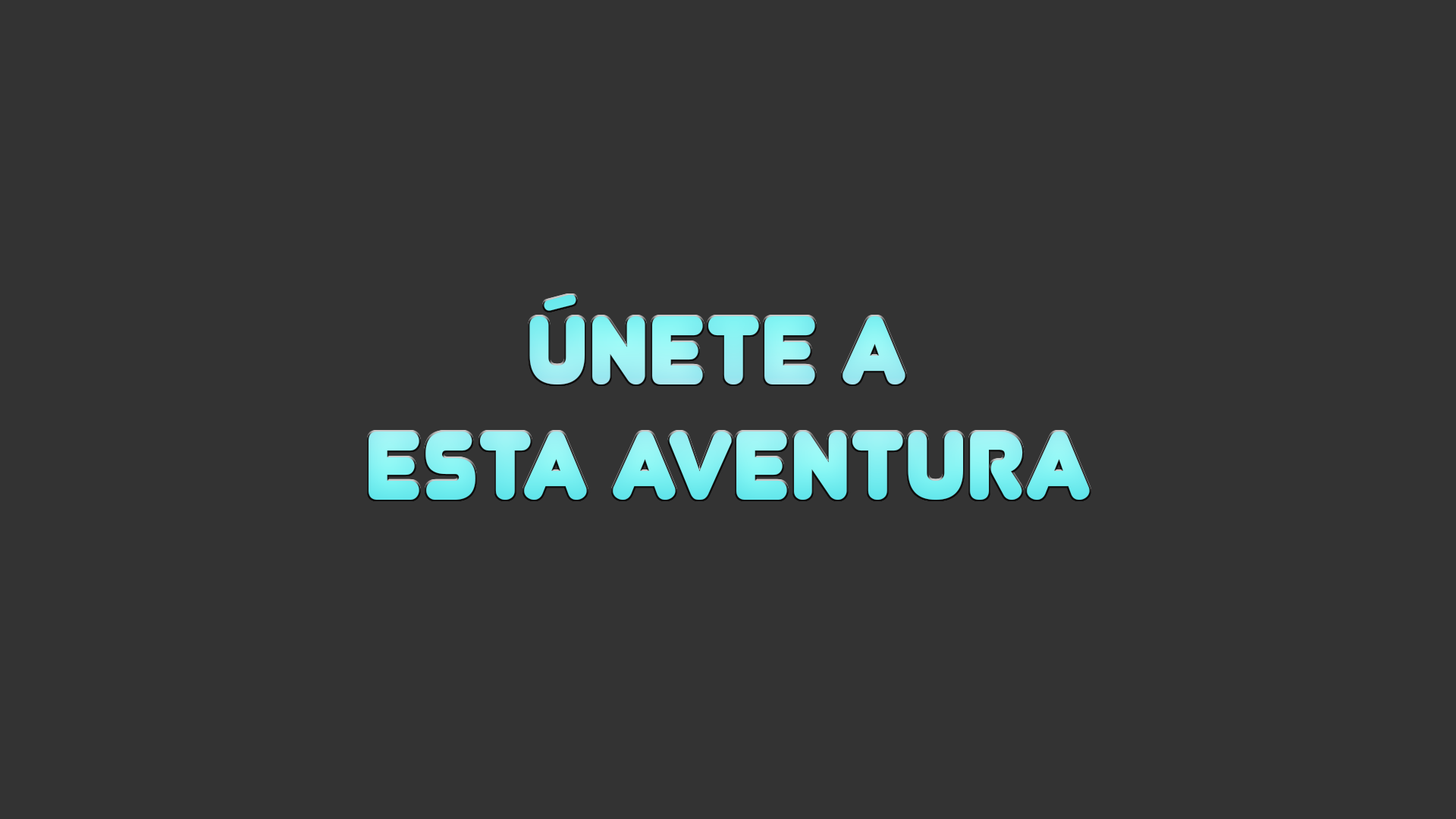
<style>
.page{position:relative;width:1456px;height:819px;background:#333333}
.page>*{position:absolute;margin:0}
.t1{font:96.3px "Junegull-Regular";color:#8ef1f3}
</style>
<div class="page">
<p class="t1" style="left:369px;top:295px;width:721px;height:205px;text-align:center">Únete a <br>Esta aventura</p>
</div>
